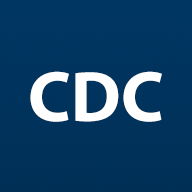
<style>
.page{position:relative;width:192px;height:192px}
.page>*{position:absolute;margin:0}
.t1{font:72px "MyriadPro-Bold";color:#ffffff}
</style>
<div class="page">
<p class="t1" style="left:30px;top:71px;width:132px;height:51px">CDC</p>
</div>
